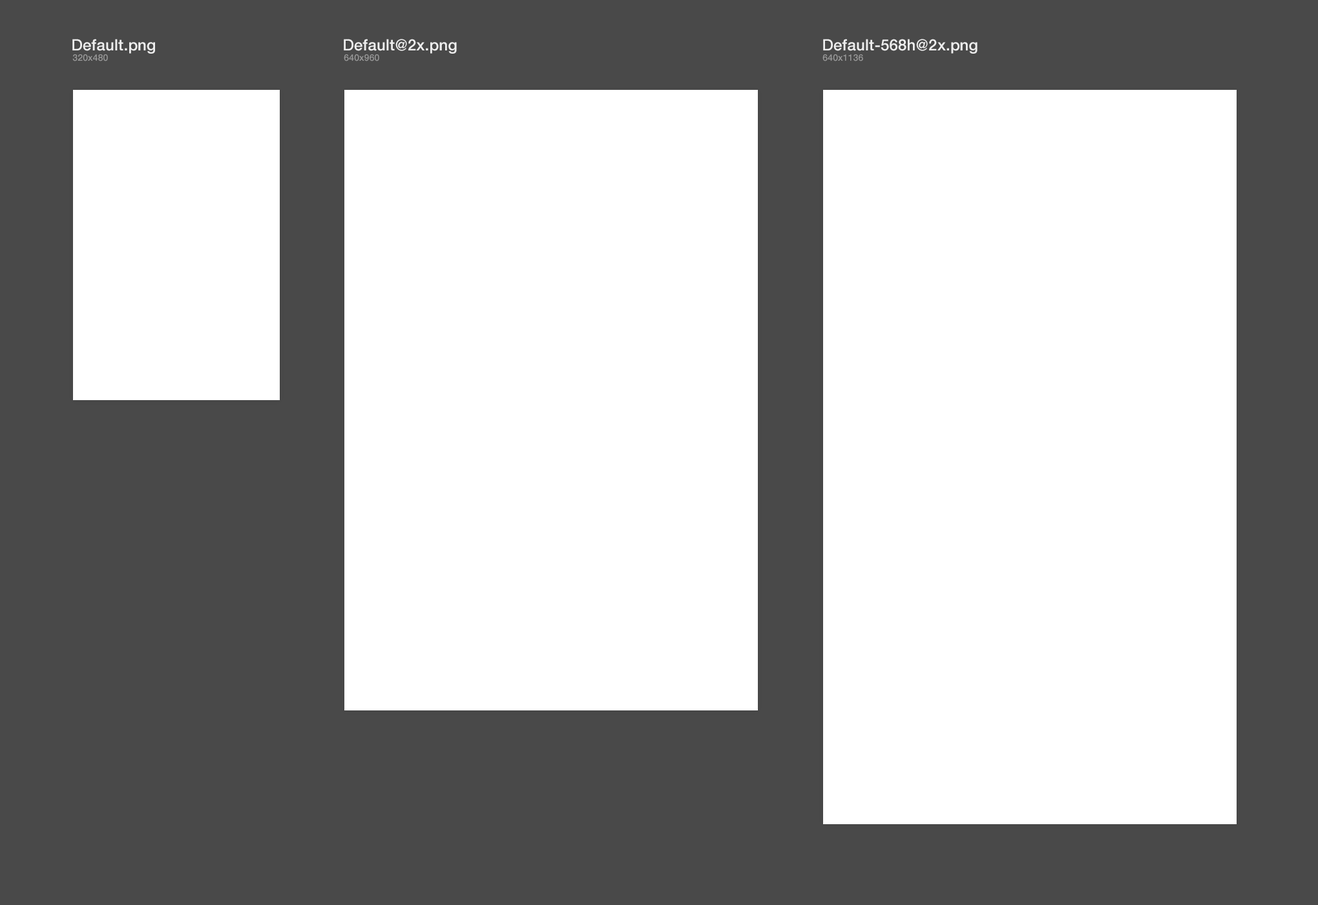
<style>
.page{position:relative;width:1318px;height:905px;background:#ffffff}
.page>*{position:absolute;margin:0}
.t1{font:15.5px "HelveticaNeue-Medium";letter-spacing:0.01em;color:#eeeeee}
.t2{font:9px "HelveticaNeue-Medium";letter-spacing:0.01em;color:#999999}
</style>
<div class="page">
<p class="t1" style="left:72px;top:39px;width:83px;height:15px">Default.png</p>
<p class="t1" style="left:344px;top:39px;width:113px;height:15px">Default@2x.png</p>
<p class="t1" style="left:823px;top:39px;width:155px;height:15px">Default-568h@2x.png</p>
<p class="t2" style="left:72px;top:54px;width:36px;height:7px">320x480</p>
<p class="t2" style="left:344px;top:54px;width:35px;height:7px">640x960</p>
<p class="t2" style="left:823px;top:54px;width:40px;height:7px">640x1136</p>
</div>
